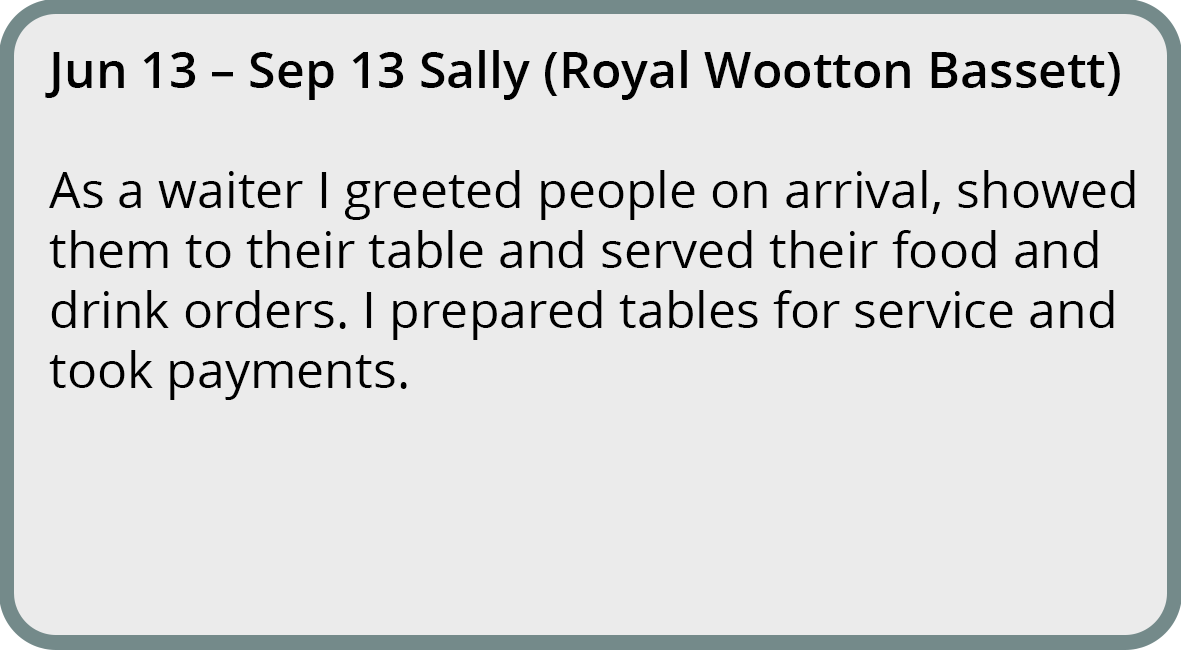
<style>
.page{position:relative;width:1181px;height:650px;background:#ebebeb}
.page>*{position:absolute;margin:0}
.t1{font:50px "OpenSans-Regular";color:#000000}
.t2{font:50px "OpenSans-SemiBold";color:#000000}
</style>
<div class="page">
<p class="t1" style="left:45px;top:50px;width:1090px;height:350px"><span class="t2">Jun 13 – Sep 13 Sally (Royal Wootton Bassett)<br><br></span>As a waiter I greeted people on arrival, showed them to their table and served their food and drink orders. I prepared tables for service and took payments.</p>
</div>
